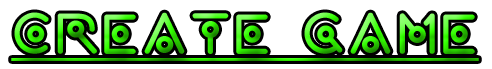
<style>
.page{position:relative;width:492px;height:69px;background:#ffffff}
.page>*{position:absolute;margin:0}
.t1{font:58.3px "wearealien!!";text-decoration:underline}
</style>
<div class="page">
<p class="t1" style="left:11px;top:12px;width:468px;height:49px">Create game</p>
</div>
